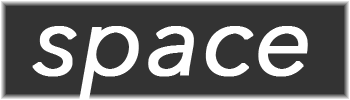
<style>
.page{position:relative;width:350px;height:100px;background:#333333}
.page>*{position:absolute;margin:0}
.t1{font:100px "AvenirNext-Italic";color:#ffffff;font-weight:bold}
</style>
<div class="page">
<p class="t1" style="left:32px;top:26px;width:276px;height:74px">space</p>
</div>
